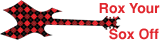
<style>
.page{position:relative;width:164px;height:40px;background:#ffffff}
.page>*{position:absolute;margin:0}
.t1{font:14px "Helvetica-Bold";color:#e1262d}
</style>
<div class="page">
<p class="t1" style="left:99px;top:3px;width:61px;height:11px">Rox Your</p>
<p class="t1" style="left:109px;top:28px;width:50px;height:12px">Sox Off</p>
</div>
